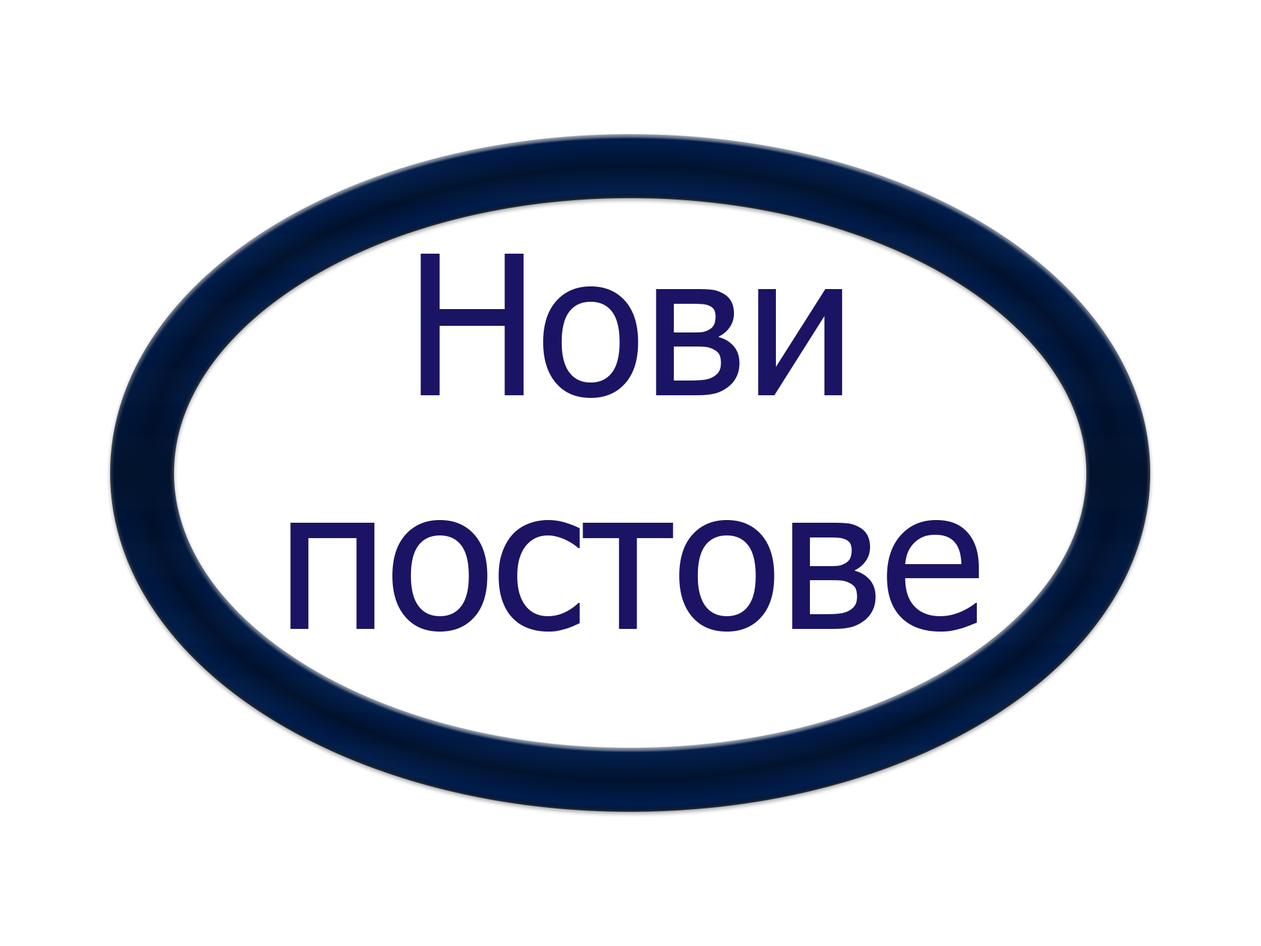
<style>
.page{position:relative;width:1261px;height:946px;background:#ffffff}
.page>*{position:absolute;margin:0}
.t1{font:194.6px "Tahoma";color:#1b1464}
.t2{font:194.6px "Microsoft-Himalaya";color:#1b1464}
</style>
<div class="page">
<p class="t1" style="left:290px;top:254px;width:690px;height:377px;text-align:center"><span class="t2"> </span>Нови<br>постове</p>
</div>
